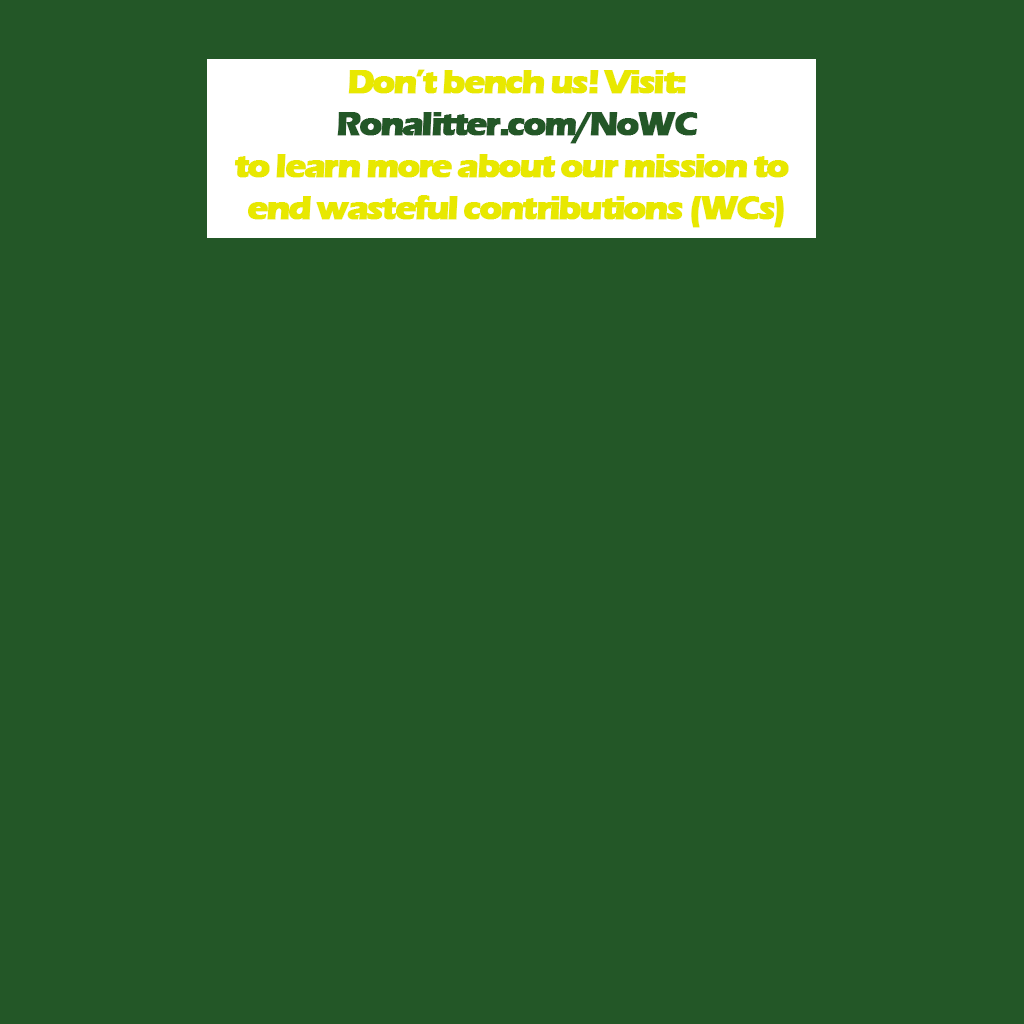
<style>
.page{position:relative;width:1024px;height:1024px;background:#235727}
.page>*{position:absolute;margin:0}
.t1{font:35px "ErasITC-Bold";letter-spacing:-0.075em;color:#e8e800;font-weight:bold}
.t2{font:35px "ErasITC-Bold";letter-spacing:-0.075em;color:#235727;font-weight:bold}
</style>
<div class="page">
<p class="t1" style="left:234px;top:69px;width:555px;height:159px;text-align:center">Don’t bench us! Visit:<br><span class="t2">Ronalitter.com/NoWC<br></span>to learn more about our mission to <br>end wasteful contributions (WCs)</p>
</div>
